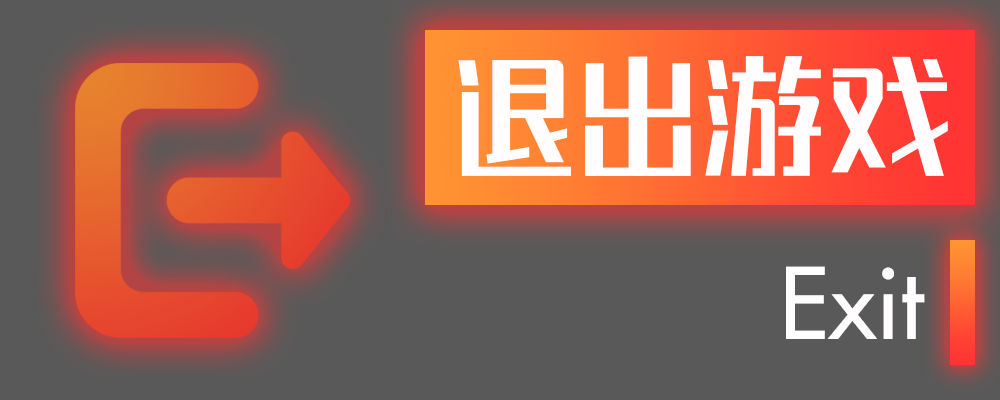
<style>
.page{position:relative;width:1000px;height:400px;background:#595959}
.page>*{position:absolute;margin:0}
.t1{font:125px "REEJIZhenyanGB20GX-Medium";color:#fffdfd}
.t2{font:95.8px "Futura-Medium";color:#fffdfd}
</style>
<div class="page">
<p class="t1" style="left:458px;top:56px;width:490px;height:120px">退出游戏</p>
<p class="t2" style="left:786px;top:266px;width:139px;height:73px">Exit</p>
</div>
